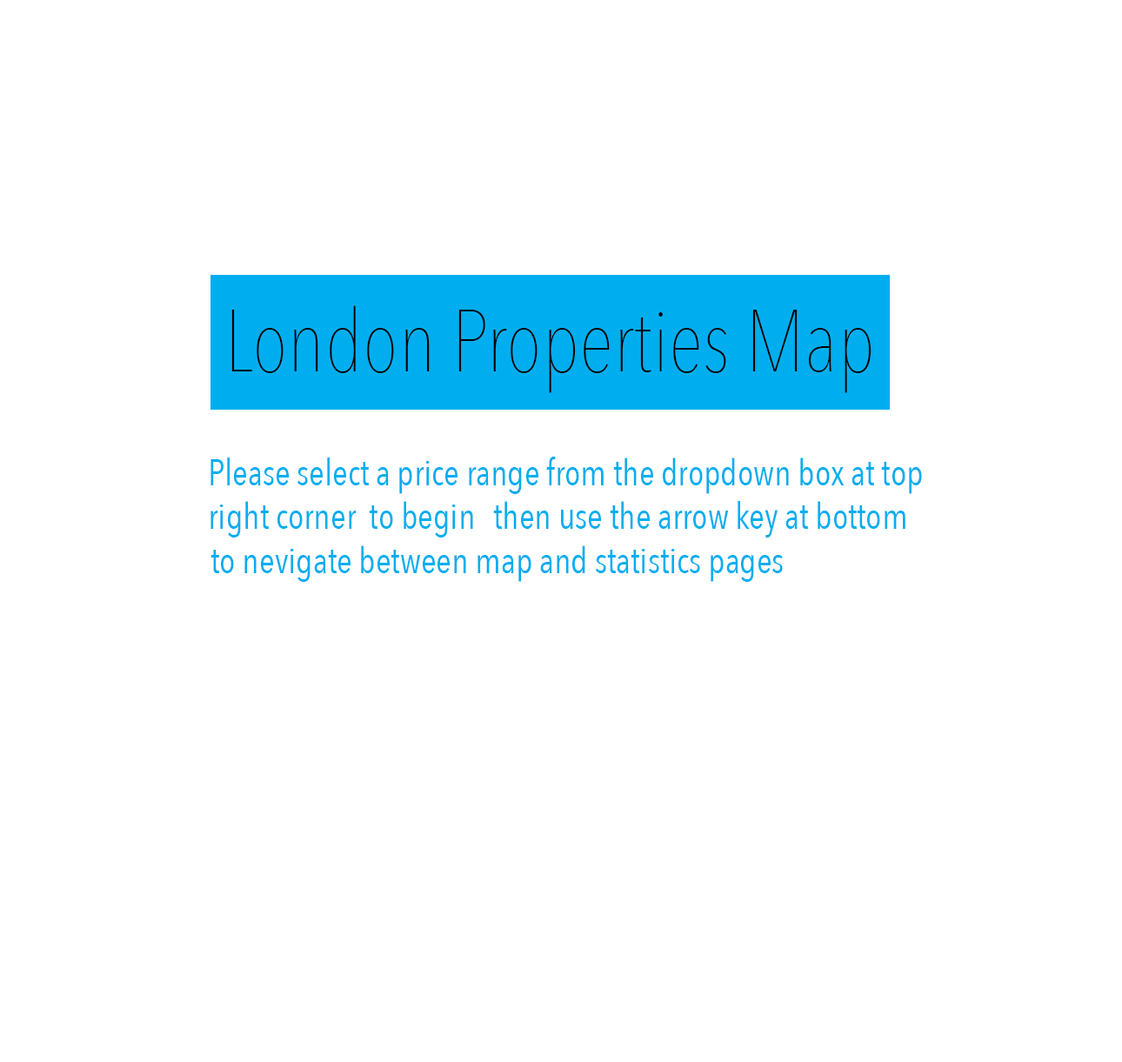
<style>
.page{position:relative;width:1122px;height:1062px;background:#ffffff}
.page>*{position:absolute;margin:0}
.t1{font:87px "AvenirNextCondensed-UltraLight";color:#000000}
.t2{font:36.3px "AvenirNextCondensed-Regular";color:#00aeef}
</style>
<div class="page">
<p class="t1" style="left:231px;top:305px;width:641px;height:88px">London Properties Map</p>
<p class="t2" style="left:211px;top:457px;width:711px;height:81px">Please select a price range from the dropdown box at top <br>right corner  to begin</p>
<p class="t2" style="left:493px;top:501px;width:413px;height:37px">then use the arrow key at bottom</p>
<p class="t2" style="left:211px;top:546px;width:572px;height:36px">to nevigate between map and statistics pages</p>
</div>
